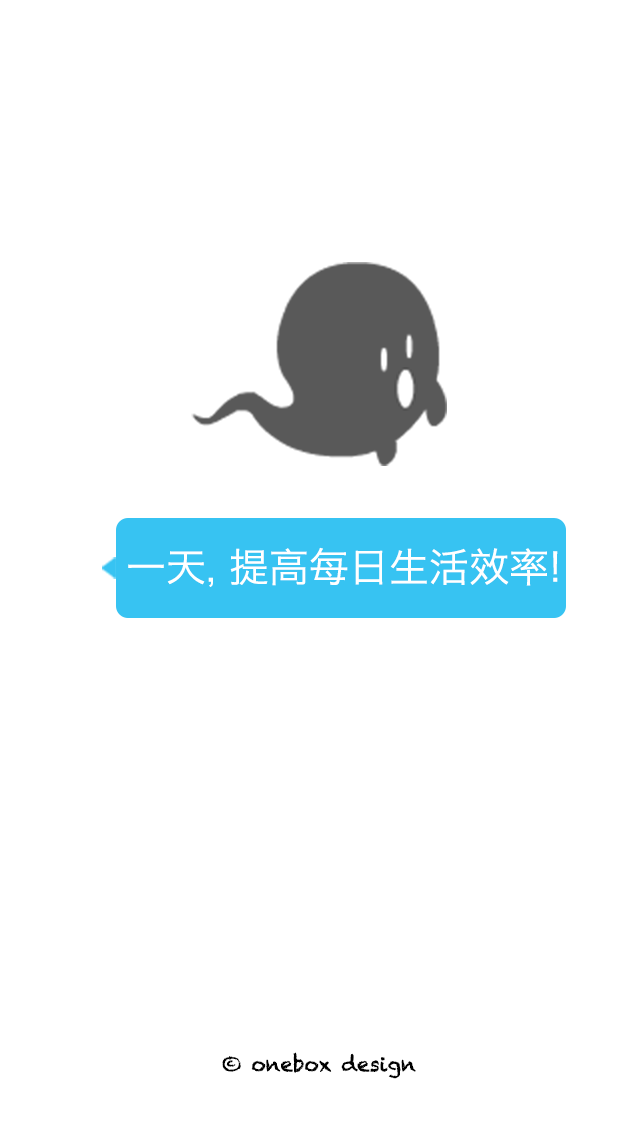
<style>
.page{position:relative;width:640px;height:1136px;background:#ffffff}
.page>*{position:absolute;margin:0}
.t1{font:40px "HiraginoSansGB-W3";color:#ffffff}
.t2{font:20px "Chalkduster";color:#000000}
</style>
<div class="page">
<p class="t1" style="left:128px;top:547px;width:430px;height:40px">一天, 提高每日生活效率!</p>
<p class="t2" style="left:222px;top:1052px;width:194px;height:27px">© onebox design</p>
</div>
